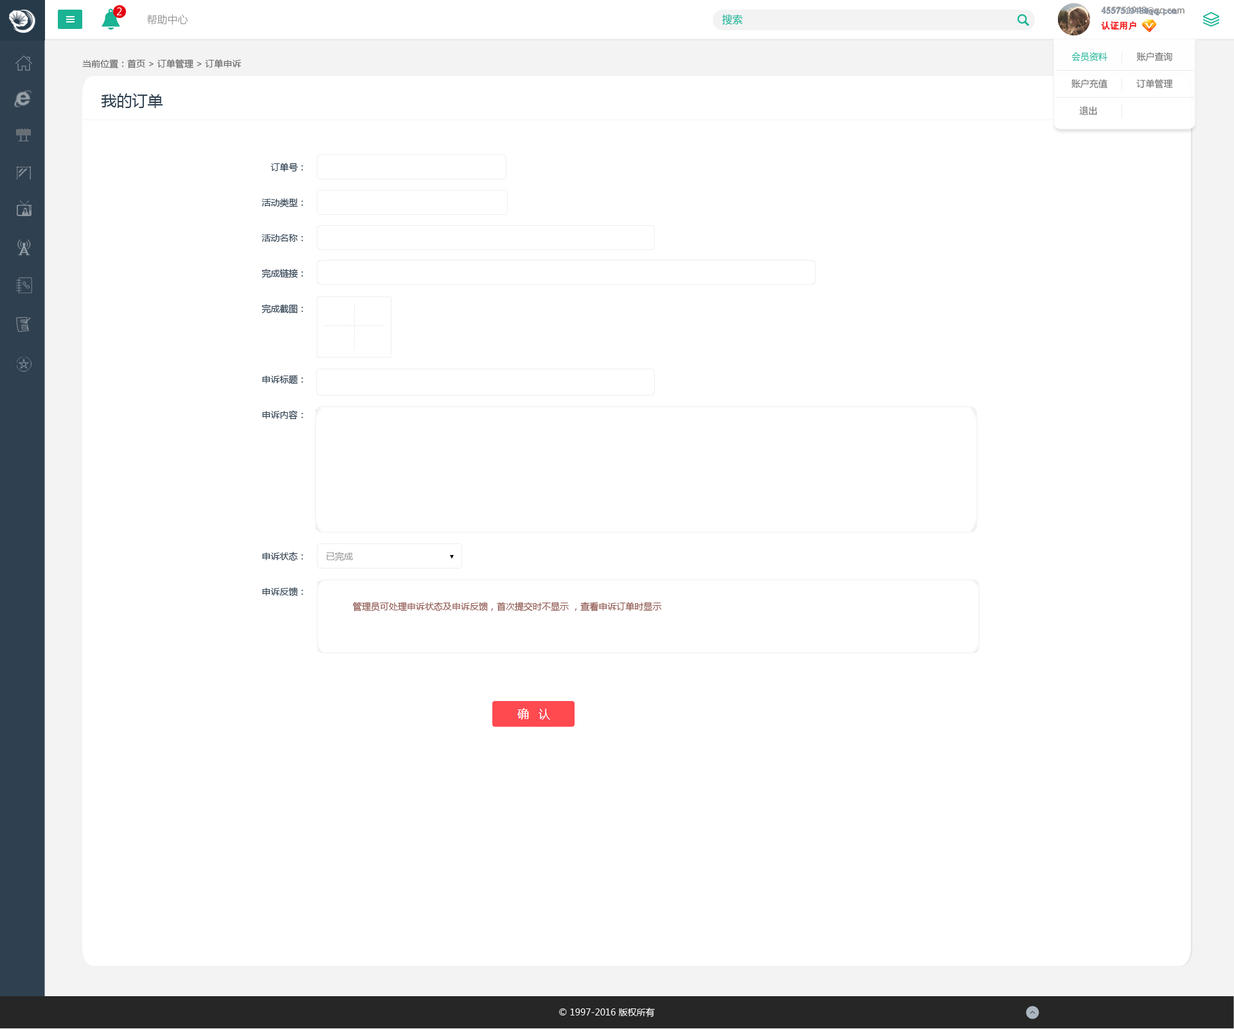
<style>
.page{position:relative;width:1234px;height:1029px;background:#ffffff}
.page>*{position:absolute;margin:0}
.t1{font:10.3px "MicrosoftYaHei";color:#ffffff}
.t2{font:10.3px "MicrosoftYaHei";color:#999999}
.t3{font:10.3px "MicrosoftYaHei";color:#1ab394}
.t4{font:9px/15.4px "AdobeHeitiStd-Regular";color:#999999}
.t5{font:9px/15.4px "AdobeHeitiStd-Regular";color:#f61e1e}
.t6{font:9px/15.4px "AdobeHeitiStd-Regular";color:#ffffff}
.t7{font:9px/15.4px "SimSun";color:#8894a4;font-weight:bold}
.t8{font:9px/15.4px "SimSun";color:#f61e1e}
.t9{font:9px/27px "MicrosoftYaHei";color:#666666}
.t10{font:9px/27px "MicrosoftYaHei";color:#1ab394}
.t11{font:9px "MicrosoftYaHei";color:#666666}
.t12{font:15.4px "MicrosoftYaHei";color:#2f4050}
.t13{font:9px/35.4px "MicrosoftYaHei";color:#2f4050}
.t14{font:9px "MicrosoftYaHei";color:#999999}
.t15{font:9px "MicrosoftYaHei";color:#8e574f}
.t16{font:9px "MicrosoftYaHei";color:#ffffff}
</style>
<div class="page">
<p class="t1" style="left:116px;top:7px;width:6px;height:8px">2</p>
<p class="t2" style="left:147px;top:14px;width:41px;height:11px">帮助中心</p>
<p class="t3" style="left:722px;top:14px;width:21px;height:11px">搜索</p>
<p class="t4" style="left:1101px;top:6px;width:84px;height:24px">455751948@qq.com<br><span class="t5">认证用户               </span><span class="t6">退出</span></p>
<p class="t7" style="left:1101px;top:7px;width:77px;height:23px">455751948@qq.com<br><span class="t8">认证用户</span></p>
<p class="t9" style="left:1072px;top:52px;width:101px;height:63px"><span class="t10">会员资料</span>           账户查询<br>账户充值           订单管理           <br>   退出</p>
<p class="t11" style="left:82px;top:59px;width:160px;height:10px">当前位置：首页 &gt; 订单管理 &gt; 订单申诉</p>
<p class="t12" style="left:101px;top:93px;width:62px;height:15px">我的订单</p>
<p class="t13" style="left:262px;top:163px;width:41px;height:433px;text-align:right">订单号：<br>活动类型：<br>活动名称：<br>完成链接：<br>完成截图：<br><br>申诉标题：<br>申诉内容：<br><br><br><br>申诉状态：<br>申诉反馈：</p>
<p class="t14" style="left:327px;top:552px;width:26px;height:9px">已完成</p>
<p class="t15" style="left:353px;top:602px;width:309px;height:9px">管理员可处理申诉状态及申诉反馈，首次提交时不显示 ，查看申诉订单时显示</p>
<p class="t16" style="left:559px;top:1007px;width:96px;height:10px">© 1997-2016 版权所有</p>
</div>
